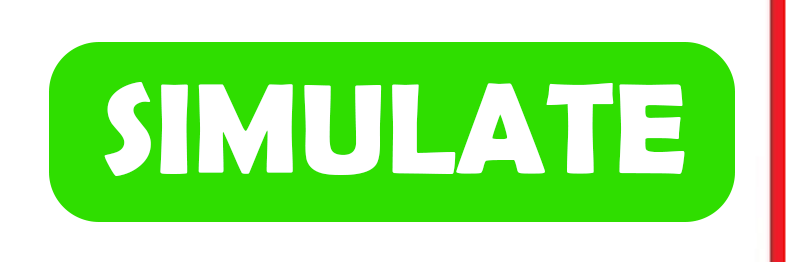
<style>
.page{position:relative;width:786px;height:262px;background:#ffffff}
.page>*{position:absolute;margin:0}
.t1{font:128.7px "BerlinSansFBDemi-Bold";color:#ffffff}
</style>
<div class="page">
<p class="t1" style="left:104px;top:82px;width:581px;height:94px">SIMULATE</p>
</div>
